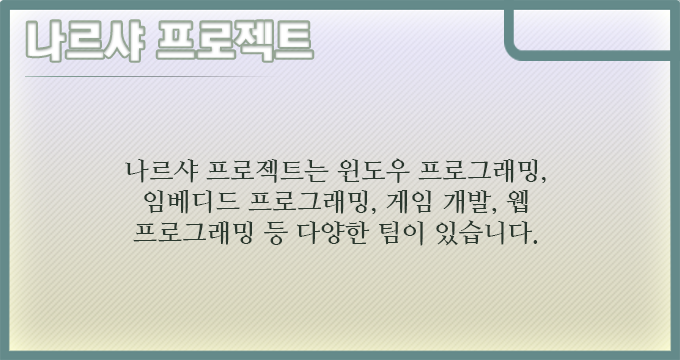
<style>
.page{position:relative;width:680px;height:360px}
.page>*{position:absolute;margin:0}
.t1{font:44px "KoreanTITGD5-R";letter-spacing:-0.01em;color:#ffffff}
.t2{font:26px "NanumMyeongjoBold";letter-spacing:-0.01em;color:#2a382e}
</style>
<div class="page">
<p class="t1" style="left:27px;top:21px;width:286px;height:40px">나르샤 프로젝트</p>
<p class="t2" style="left:125px;top:158px;width:421px;height:88px;text-align:center">나르샤 프로젝트는 윈도우 프로그래밍, 임베디드 프로그래밍, 게임 개발, 웹 프로그래밍 등 다양한 팀이 있습니다.</p>
</div>
